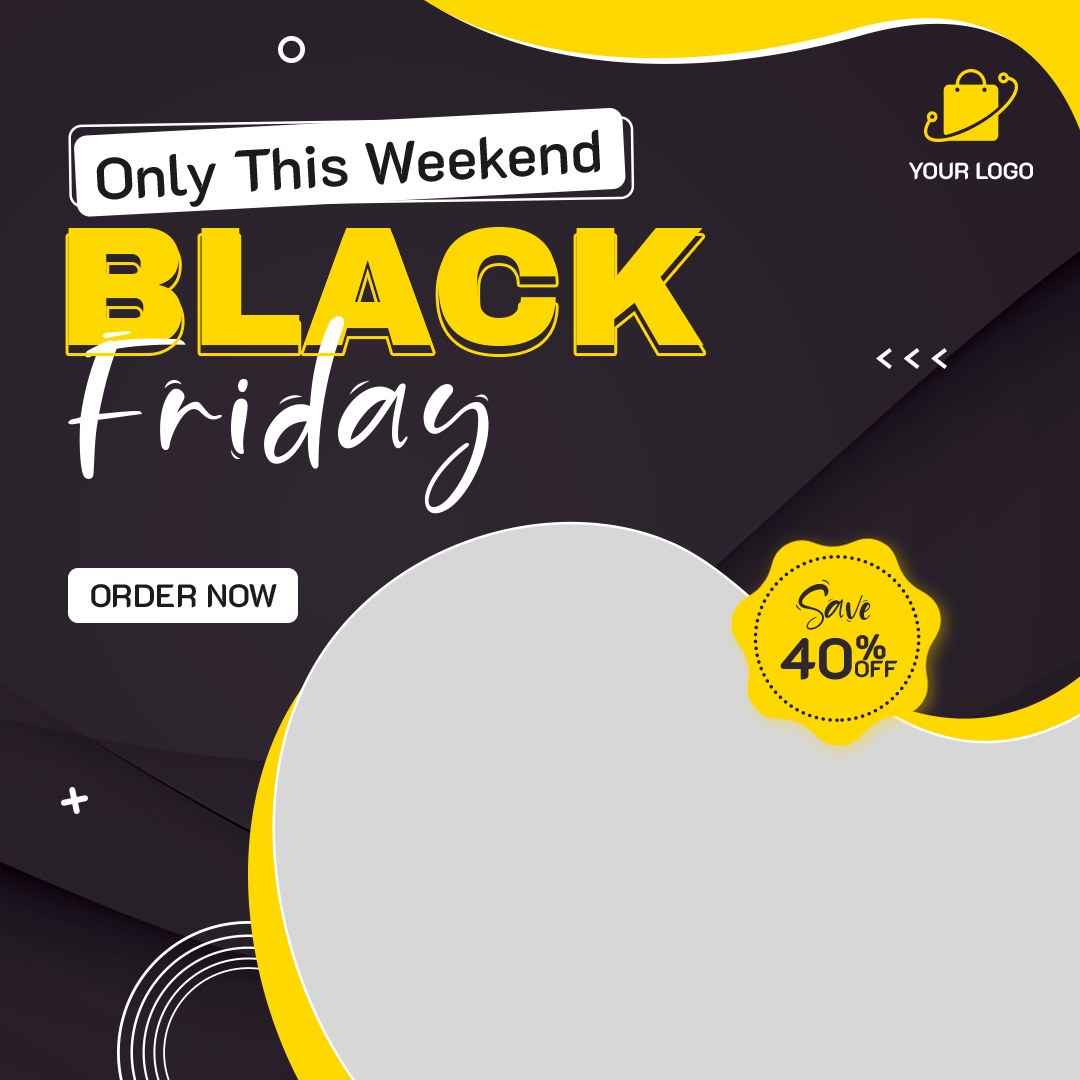
<style>
.page{position:relative;width:1080px;height:1080px;background:#d7d7d7}
.page>*{position:absolute;margin:0}
.t1{font:58.9px "K2D-SemiBold";color:#1d1a1c}
.t2{font:23.2px "K2D-Bold";color:#ffffff}
.t3{font:170px "ArchivoBlack-Regular";color:#ffd800}
.t4{font:209.2px "Sand-Beach";letter-spacing:0.055em;color:#ffffff}
.t5{font:58px "Sand-Beach";color:#2f2730}
.t6{font:32.3px "K2D-SemiBold";color:#1d1a1c}
.t7{font:58px "K2D-Bold";color:#2f2730}
.t8{font:23.2px "K2D-Bold";color:#2f2730}
</style>
<div class="page">
<p class="t1" style="left:96px;top:129px;width:504px;height:78px;rotate:-3deg">Only This Weekend</p>
<p class="t2" style="left:909px;top:162px;width:124px;height:18px">YOUR LOGO</p>
<p class="t3" style="left:68px;top:227px;width:636px;height:119px">BLACK</p>
<p class="t3" style="left:68px;top:235px;width:636px;height:119px">BLACK</p>
<p class="t4" style="left:68px;top:316px;width:421px;height:198px">Friday</p>
<p class="t5" style="left:796px;top:579px;width:75px;height:51px">Save</p>
<p class="t6" style="left:91px;top:584px;width:186px;height:24px">ORDER NOW</p>
<p class="t7" style="left:780px;top:634px;width:106px;height:46px">40%</p>
<p class="t8" style="left:855px;top:660px;width:43px;height:18px">OFF</p>
</div>
